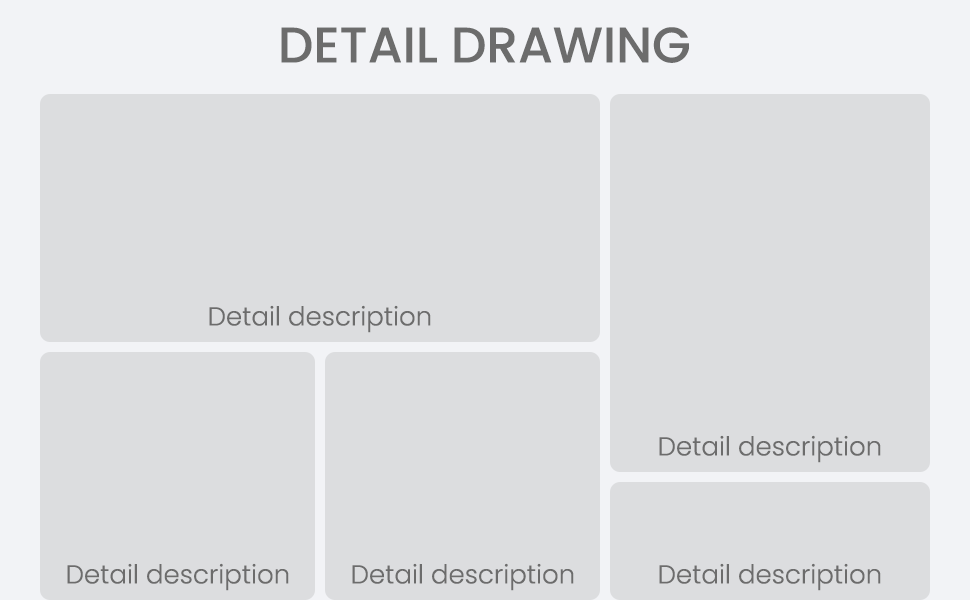
<style>
.page{position:relative;width:970px;height:600px;background:#dcdddf}
.page>*{position:absolute;margin:0}
.t1{font:50px "Poppins-Medium";color:#6c6c6c;text-transform:uppercase}
.t2{font:26px "Poppins-Light";color:#6c6c6c}
</style>
<div class="page">
<p class="t1" style="left:281px;top:27px;width:408px;height:36px">Detail drawing</p>
<p class="t2" style="left:209px;top:305px;width:222px;height:28px">Detail description</p>
<p class="t2" style="left:659px;top:435px;width:222px;height:28px">Detail description</p>
<p class="t2" style="left:67px;top:563px;width:222px;height:28px">Detail description</p>
<p class="t2" style="left:352px;top:563px;width:222px;height:28px">Detail description</p>
<p class="t2" style="left:659px;top:563px;width:222px;height:28px">Detail description</p>
</div>
